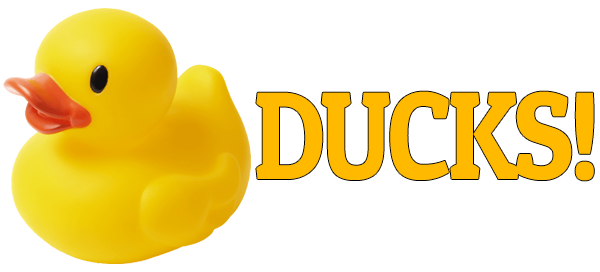
<style>
.page{position:relative;width:600px;height:272px;background:#ffffff}
.page>*{position:absolute;margin:0}
.t1{font:125px "PatuaOne-Regular";letter-spacing:-0.04em;color:#ffba00;scale:0.9 1}
</style>
<div class="page">
<p class="t1" style="left:256px;top:91px;width:338px;height:90px">DUCKS!</p>
</div>
